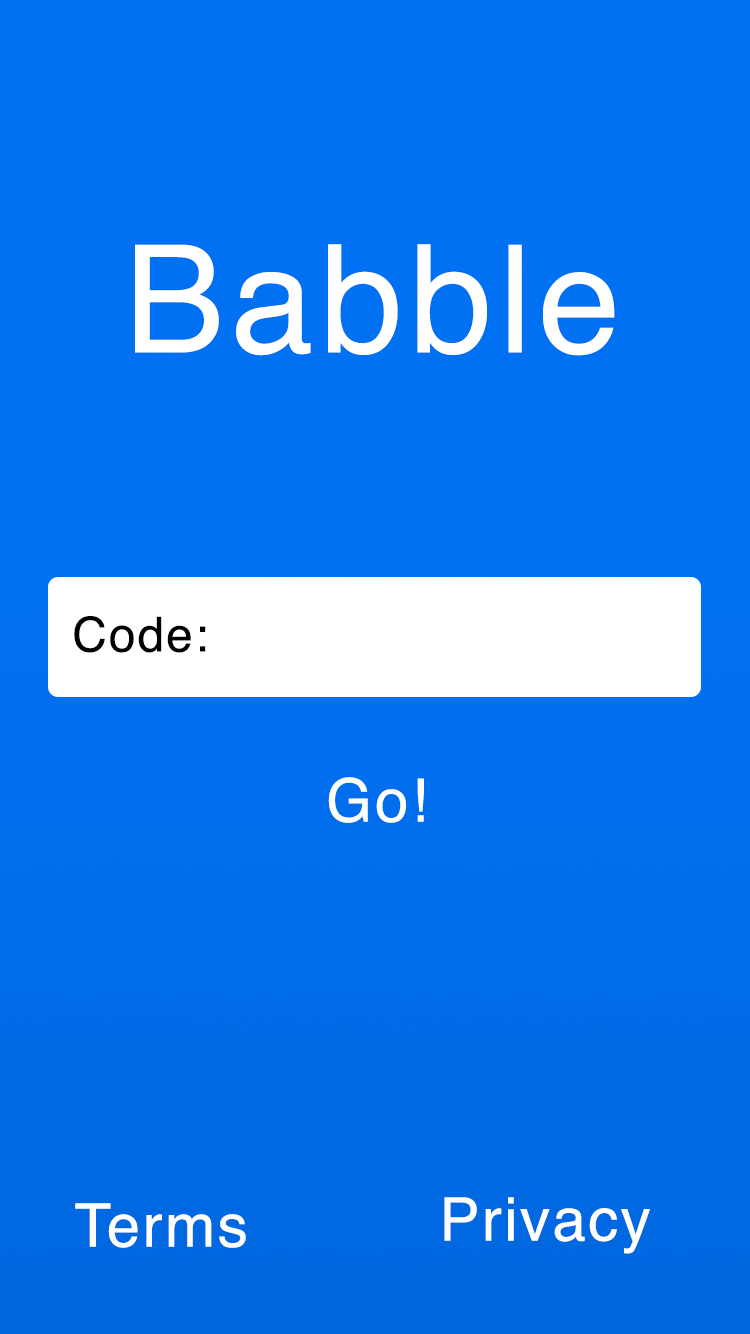
<style>
.page{position:relative;width:750px;height:1334px;background:#0071f3}
.page>*{position:absolute;margin:0}
.t1{font:150px "Helvetica";letter-spacing:0.04em;color:#ffffff}
.t2{font:48px "Helvetica";letter-spacing:0.04em;color:#000000}
.t3{font:60px "Helvetica";letter-spacing:0.04em;color:#ffffff}
</style>
<div class="page">
<p class="t1" style="left:135px;top:244px;width:480px;height:112px">Babble</p>
<p class="t2" style="left:74px;top:616px;width:132px;height:37px">Code:</p>
<p class="t3" style="left:328px;top:777px;width:96px;height:46px">Go!</p>
<p class="t3" style="left:75px;top:1203px;width:171px;height:45px">Terms</p>
<p class="t3" style="left:444px;top:1197px;width:206px;height:57px">Privacy</p>
</div>
